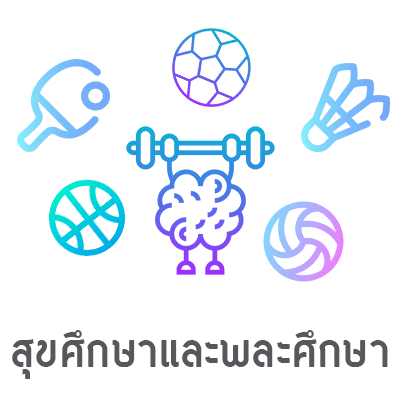
<style>
.page{position:relative;width:400px;height:400px;background:#ffffff}
.page>*{position:absolute;margin:0}
.t1{font:62.5px "Circular-Bold";color:#56585b}
</style>
<div class="page">
<p class="t1" style="left:12px;top:330px;width:376px;height:49px">สุขศึกษาและพละศึกษา</p>
</div>
